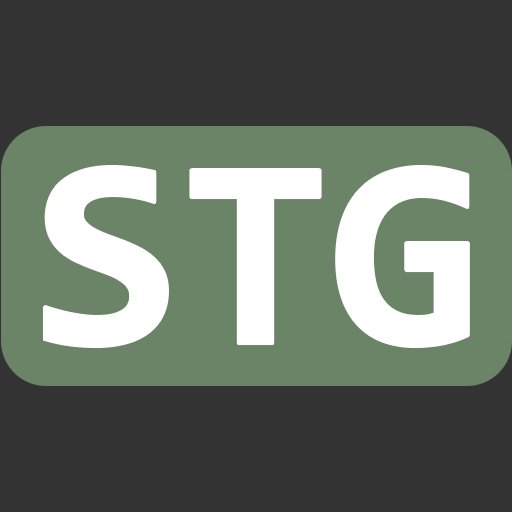
<style>
.page{position:relative;width:512px;height:512px;background:#333333}
.page>*{position:absolute;margin:0}
.t1{font:271px "Consolas-Bold";color:#ffffff}
</style>
<div class="page">
<p class="t1" style="left:44px;top:167px;width:424px;height:179px">STG</p>
</div>
